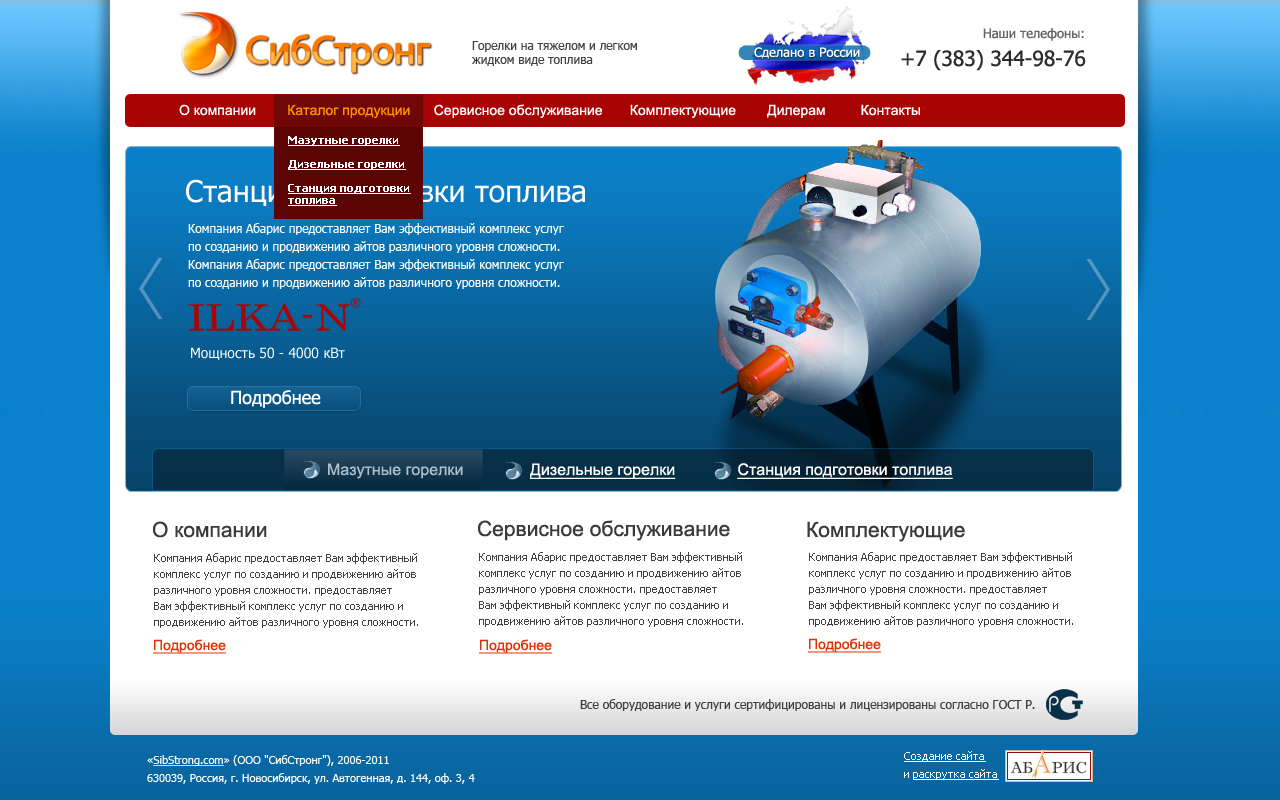
<style>
.page{position:relative;width:1280px;height:800px;background:#ffffff}
.page>*{position:absolute;margin:0}
.t1{font:13px "Tahoma";color:#656565}
.t2{font:12px "Tahoma";color:#434343}
.t3{font:21px "Tahoma";color:#2b2b2b}
.t4{font:14px "ArialMT";color:#ffffff}
.t5{font:14px "ArialMT";color:#ff9000}
.t6{font:14px "Tahoma";color:#ffffff}
.t7{font:11px/12px "Tahoma-Bold";color:#ffffff;text-decoration:underline}
.t8{font:30px "Tahoma";color:#ffffff}
.t9{font:12px/18px "Tahoma";color:#ffffff}
.t10{font:18px "Tahoma";color:#ffffff}
.t11{font:16px "ArialMT";color:#ffffff;text-decoration:underline}
.t12{font:16px "ArialMT";color:#acbeca}
.t13{font:21px "ArialMT";color:#3a3a3a}
.t14{font:11px/16px "Tahoma";color:#3f3f3f}
.t15{font:12px "Tahoma";color:#404040}
.t16{font:11px/18px "Tahoma";color:#ffffff}
.t17{font:11px/18px "Tahoma";color:#ffffff;text-decoration:underline}
</style>
<div class="page">
<p class="t1" style="left:983px;top:28px;width:101px;height:13px">Наши телефоны:</p>
<p class="t2" style="left:472px;top:41px;width:165px;height:25px">Горелки на тяжелом и легком <br>жидком виде топлива</p>
<p class="t3" style="left:901px;top:50px;width:185px;height:21px">+7 (383) 344-98-76</p>
<p class="t4" style="left:179px;top:104px;width:741px;height:14px">О компании     <span class="t5">   Каталог продукции</span>      Сервисное обслуживание       Комплектующие        Дилерам         Контакт<span class="t6">ы</span></p>
<p class="t7" style="left:288px;top:136px;width:123px;height:70px">Мазутные горелки               <br><br>Дизельные горелки              <br><br>Станция подготовки<br>топлива</p>
<p class="t8" style="left:186px;top:179px;width:399px;height:27px">Станция подготовки топлива</p>
<p class="t9" style="left:188px;top:223px;width:376px;height:66px">Компания Абарис предоставляет Вам эффективный комплекс услуг <br>по созданию и продвижению айтов различного уровня сложности. <br>Компания Абарис предоставляет Вам эффективный комплекс услуг <br>по созданию и продвижению айтов различного уровня сложности.</p>
<p class="t6" style="left:191px;top:347px;width:154px;height:13px">Мощность 50 - 4000 кВт</p>
<p class="t10" style="left:231px;top:390px;width:90px;height:18px">Подробнее</p>
<p class="t11" style="left:328px;top:463px;width:625px;height:16px"><span class="t12">Мазутные горелки               </span>Дизельные горелки              Станция подготовки топлива</p>
<p class="t13" style="left:153px;top:521px;width:114px;height:17px">О компании</p>
<p class="t13" style="left:478px;top:520px;width:252px;height:21px">Сервисное обслуживание</p>
<p class="t13" style="left:807px;top:521px;width:158px;height:21px">Комплектующие</p>
<p class="t14" style="left:479px;top:552px;width:264px;height:75px">Компания Абарис предоставляет Вам эффективный <br>комплекс услуг по созданию и продвижению айтов <br>различного уровня сложности. предоставляет <br>Вам эффективный комплекс услуг по созданию и <br>продвижению айтов различного уровня сложности.</p>
<p class="t14" style="left:809px;top:552px;width:264px;height:75px">Компания Абарис предоставляет Вам эффективный <br>комплекс услуг по созданию и продвижению айтов <br>различного уровня сложности. предоставляет <br>Вам эффективный комплекс услуг по созданию и <br>продвижению айтов различного уровня сложности.</p>
<p class="t15" style="left:580px;top:699px;width:455px;height:12px">Все оборудование и услуги сертифицированы и лицензированы согласно ГОСТ Р.</p>
<p class="t16" style="left:147px;top:755px;width:328px;height:29px">«<span class="t17">SibStrong.com</span>» (ООО "СибСтронг"), 2006-2011<br>630039, Россия, г. Новосибирск, ул. Автогенная, д. 144, оф. 3, 4</p>
<p class="t17" style="left:904px;top:751px;width:95px;height:29px">Создание сайта<br><span class="t16">и </span>раскрутка сайта</p>
</div>
